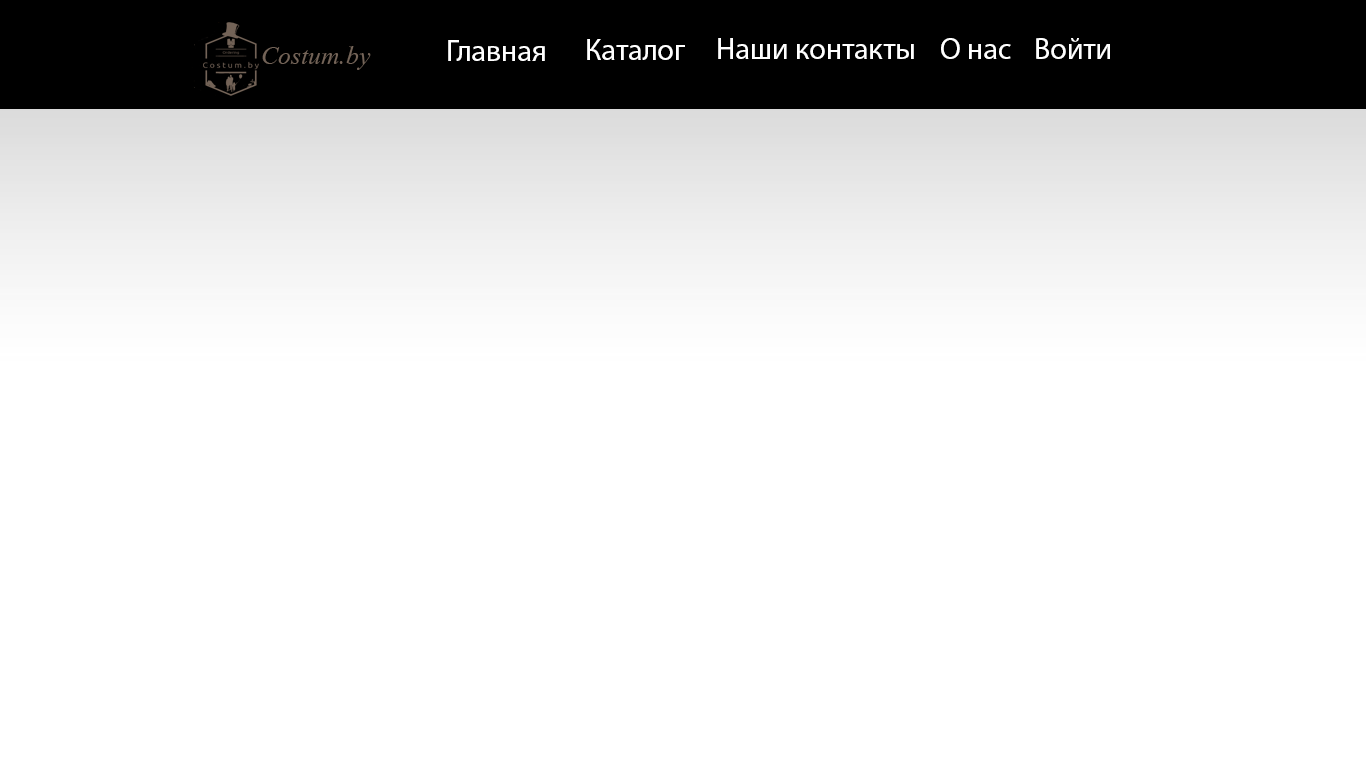
<style>
.page{position:relative;width:1366px;height:768px;background:#ffffff}
.page>*{position:absolute;margin:0}
.t1{font:30px "MyriadPro-Regular";color:#ffffff}
</style>
<div class="page">
<p class="t1" style="left:448px;top:40px;width:97px;height:21px">Главная</p>
<p class="t1" style="left:587px;top:39px;width:98px;height:21px">Каталог</p>
<p class="t1" style="left:718px;top:38px;width:196px;height:21px">Наши контакты</p>
<p class="t1" style="left:941px;top:38px;width:70px;height:21px">О нас</p>
<p class="t1" style="left:1036px;top:38px;width:74px;height:21px">Войти</p>
</div>
